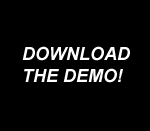
<style>
.page{position:relative;width:150px;height:131px;background:#000000}
.page>*{position:absolute;margin:0}
.t1{font:18px "Arial-BoldItalicMT";color:#ffffff}
</style>
<div class="page">
<p class="t1" style="left:22px;top:46px;width:108px;height:37px">DOWNLOAD<br>THE DEMO!</p>
</div>
